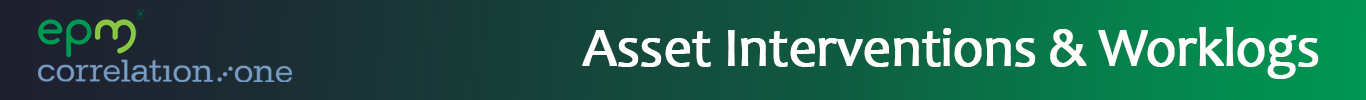
<style>
.page{position:relative;width:1366px;height:100px}
.page>*{position:absolute;margin:0}
.t1{font:55px "Candara";letter-spacing:-0.025em;color:#fefffc;font-weight:bold}
</style>
<div class="page">
<p class="t1" style="left:582px;top:27px;width:737px;height:52px">Asset Interventions &amp; Worklogs</p>
</div>
